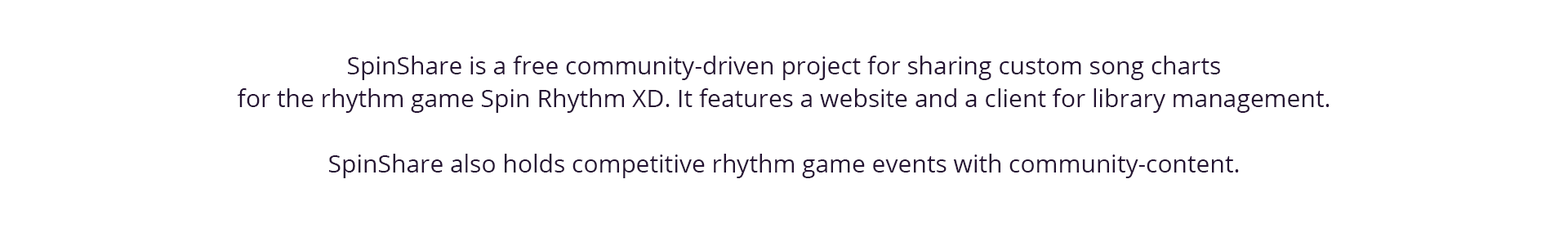
<style>
.page{position:relative;width:1568px;height:233px;background:#ffffff}
.page>*{position:absolute;margin:0}
.t1{font:24.5px/32.7px "OpenSans";color:#251333}
</style>
<div class="page">
<p class="t1" style="left:237px;top:56px;width:1093px;height:122px;text-align:center">SpinShare is a free community-driven project for sharing custom song charts<br>for the rhythm game Spin Rhythm XD. It features a website and a client for library management.<br><br>SpinShare also holds competitive rhythm game events with community-content.</p>
</div>
